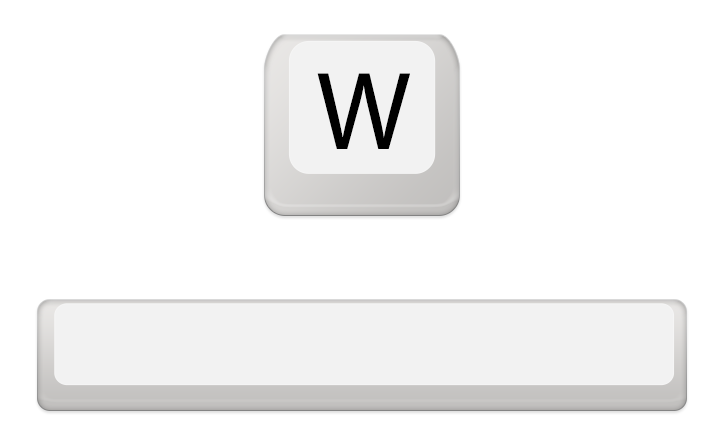
<style>
.page{position:relative;width:720px;height:432px;background:#ffffff}
.page>*{position:absolute;margin:0}
.t1{font:112px "MyriadPro-Regular";color:#000000}
</style>
<div class="page">
<p class="t1" style="left:317px;top:73px;width:93px;height:76px">W</p>
</div>
